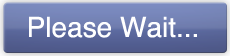
<style>
.page{position:relative;width:230px;height:56px}
.page>*{position:absolute;margin:0}
.t1{font:28px "Helvetica";color:#ffffff}
</style>
<div class="page">
<p class="t1" style="left:29px;top:16px;width:168px;height:22px">Please Wait...</p>
</div>
